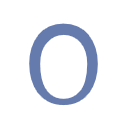
<style>
.page{position:relative;width:128px;height:128px;background:#ffffff}
.page>*{position:absolute;margin:0}
.t1{font:180px "Buda";color:#657bae}
</style>
<div class="page">
<p class="t1" style="left:30px;top:24px;width:67px;height:81px">o</p>
</div>
